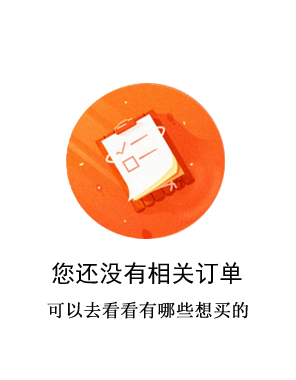
<style>
.page{position:relative;width:296px;height:380px;background:#ffffff}
.page>*{position:absolute;margin:0}
.t1{font:24px "SimHei";color:#050505}
.t2{font:18px "SimSun";color:#050505;font-weight:bold}
</style>
<div class="page">
<p class="t1" style="left:52px;top:262px;width:190px;height:22px">您还没有相关订单</p>
<p class="t2" style="left:47px;top:301px;width:201px;height:18px">可以去看看有哪些想买的</p>
</div>
